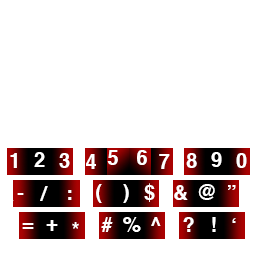
<style>
.page{position:relative;width:256px;height:256px;background:#ffffff}
.page>*{position:absolute;margin:0}
.t1{font:20px "Helvetica-Bold";letter-spacing:-0.05em;color:#ffffff}
</style>
<div class="page">
<p class="t1" style="left:107px;top:150px;width:11px;height:15px">5</p>
<p class="t1" style="left:137px;top:150px;width:10px;height:15px">6</p>
<p class="t1" style="left:10px;top:153px;width:7px;height:15px">1</p>
<p class="t1" style="left:34px;top:152px;width:11px;height:15px">2</p>
<p class="t1" style="left:59px;top:153px;width:11px;height:15px">3</p>
<p class="t1" style="left:86px;top:154px;width:10px;height:15px">4</p>
<p class="t1" style="left:159px;top:154px;width:11px;height:15px">7</p>
<p class="t1" style="left:186px;top:153px;width:11px;height:15px">8</p>
<p class="t1" style="left:211px;top:152px;width:11px;height:15px">9</p>
<p class="t1" style="left:236px;top:153px;width:11px;height:15px">0</p>
<p class="t1" style="left:96px;top:184px;width:6px;height:19px">(</p>
<p class="t1" style="left:123px;top:184px;width:6px;height:19px">)</p>
<p class="t1" style="left:144px;top:183px;width:11px;height:19px">$</p>
<p class="t1" style="left:174px;top:185px;width:14px;height:15px">&amp;</p>
<p class="t1" style="left:198px;top:184px;width:17px;height:16px">@</p>
<p class="t1" style="left:228px;top:185px;width:8px;height:5px">”</p>
<p class="t1" style="left:17px;top:193px;width:7px;height:2px">-</p>
<p class="t1" style="left:40px;top:186px;width:8px;height:15px">/</p>
<p class="t1" style="left:68px;top:190px;width:4px;height:10px">:</p>
<p class="t1" style="left:46px;top:220px;width:12px;height:11px">+</p>
<p class="t1" style="left:72px;top:222px;width:7px;height:7px">*</p>
<p class="t1" style="left:101px;top:217px;width:12px;height:15px">#</p>
<p class="t1" style="left:123px;top:217px;width:18px;height:15px">%</p>
<p class="t1" style="left:151px;top:217px;width:10px;height:9px">^</p>
<p class="t1" style="left:183px;top:217px;width:11px;height:15px">?</p>
<p class="t1" style="left:212px;top:217px;width:4px;height:15px">!</p>
<p class="t1" style="left:232px;top:218px;width:4px;height:5px">‘</p>
<p class="t1" style="left:22px;top:223px;width:12px;height:6px">=</p>
</div>
